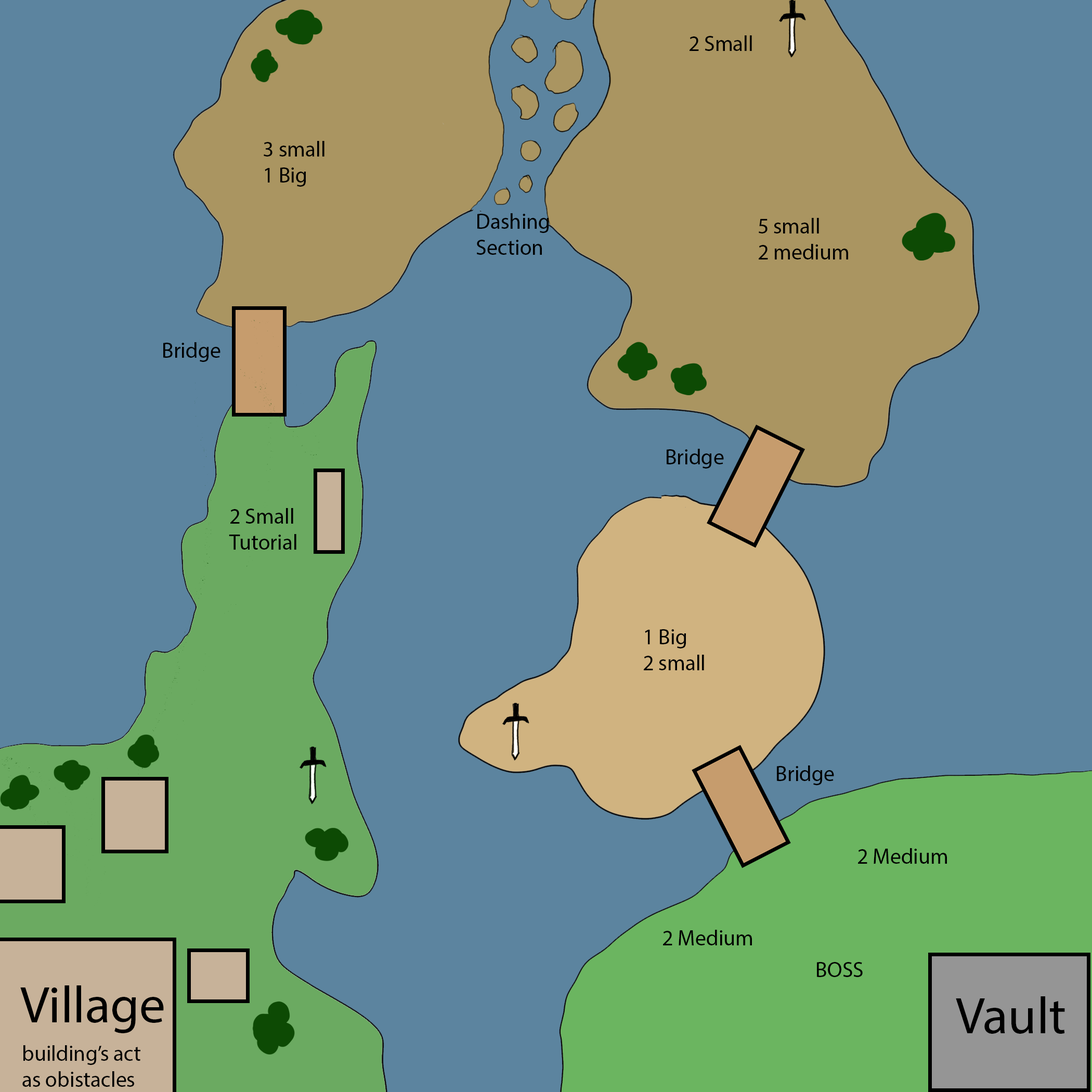
<style>
.page{position:relative;width:1092px;height:1092px;background:#5c849f}
.page>*{position:absolute;margin:0}
.t1{font:21.7px "MyriadPro-Regular";color:#000000}
.t2{font:52px "MyriadPro-Regular";color:#000000}
</style>
<div class="page">
<p class="t1" style="left:690px;top:35px;width:62px;height:16px">2 Small</p>
<p class="t1" style="left:264px;top:141px;width:60px;height:46px">3 small<br>1 Big</p>
<p class="t1" style="left:476px;top:213px;width:73px;height:42px">Dashing<br>Section</p>
<p class="t1" style="left:759px;top:218px;width:89px;height:41px">5 small<br>2 medium</p>
<p class="t1" style="left:163px;top:342px;width:57px;height:20px">Bridge</p>
<p class="t1" style="left:667px;top:449px;width:57px;height:20px">Bridge</p>
<p class="t1" style="left:229px;top:508px;width:67px;height:42px">2 Small<br>Tutorial</p>
<p class="t1" style="left:644px;top:629px;width:60px;height:41px">1 Big<br>2 small</p>
<p class="t1" style="left:777px;top:765px;width:57px;height:20px">Bridge</p>
<p class="t1" style="left:858px;top:848px;width:89px;height:16px">2 Medium</p>
<p class="t1" style="left:663px;top:930px;width:89px;height:15px">2 Medium</p>
<p class="t1" style="left:817px;top:962px;width:46px;height:15px">BOSS</p>
<p class="t2" style="left:20px;top:985px;width:144px;height:48px">Village</p>
<p class="t2" style="left:956px;top:996px;width:109px;height:38px">Vault</p>
<p class="t1" style="left:22px;top:1045px;width:118px;height:42px">building’s act <br>as obistacles</p>
</div>
